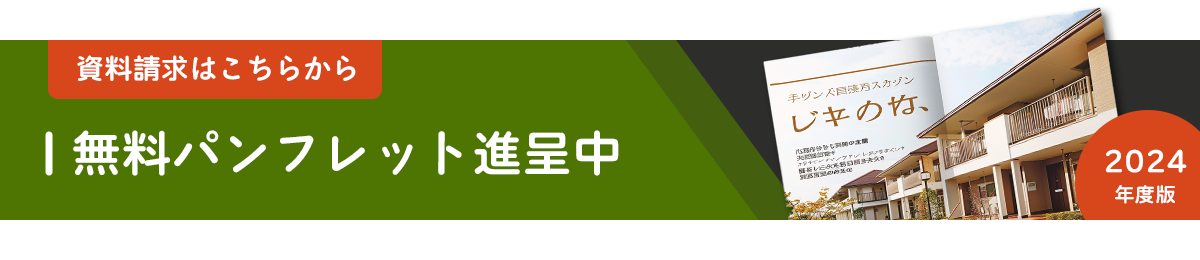
<style>
.page{position:relative;width:1200px;height:260px;background:#ffffff}
.page>*{position:absolute;margin:0}
.t1{font:28.4px "BokutohRera-5";color:#ffffff}
.t2{font:50.2px "BokutohRera-5";color:#ffffff}
.t3{font:29px/30.2px "BokutohRera-5";color:#ffffff}
.t4{font:20.6px/30.2px "BokutohRera-5";color:#ffffff}
</style>
<div class="page">
<p class="t1" style="left:77px;top:55px;width:279px;height:27px">資料請求はこちらから</p>
<p class="t2" style="left:73px;top:130px;width:546px;height:46px">無料パンフレット進呈中</p>
<p class="t3" style="left:1105px;top:149px;width:82px;height:55px;text-align:center">2024<br><span class="t4">年度版</span></p>
</div>
